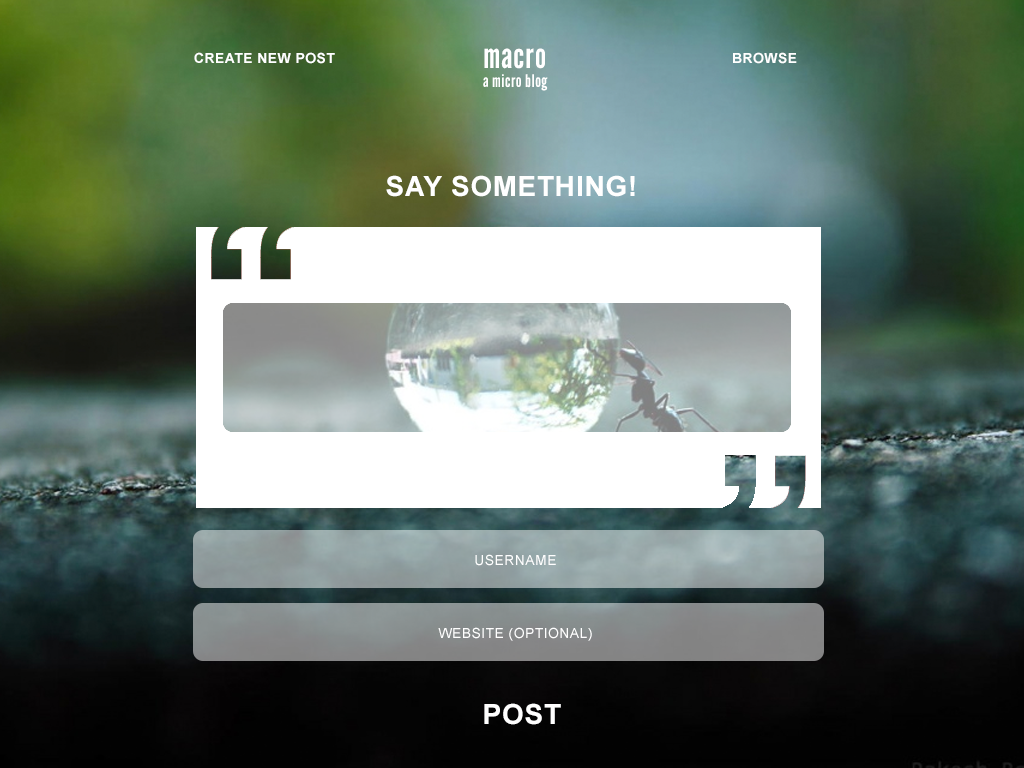
<style>
.page{position:relative;width:1024px;height:768px}
.page>*{position:absolute;margin:0}
.t1{font:24px "Arial-BoldMT";letter-spacing:0.03em;color:#ffffff;text-transform:uppercase}
.t2{font:60px "LeagueGothic-Regular";letter-spacing:0.03em;color:#ffffff}
.t3{font:30px "LeagueGothic-Regular";letter-spacing:0.03em;color:#ffffff}
.t4{font:48px "Arial-BoldMT";letter-spacing:0.03em;color:#ffffff;text-transform:uppercase}
.t5{font:24px "ArialMT";letter-spacing:0.03em;color:#ffffff;text-transform:uppercase}
</style>
<div class="page">
<p class="t1" style="left:194px;top:52px;width:141px;height:12px">create new post</p>
<p class="t2" style="left:484px;top:48px;width:61px;height:21px">macro</p>
<p class="t1" style="left:733px;top:52px;width:64px;height:12px">BROWSe</p>
<p class="t3" style="left:483px;top:74px;width:65px;height:17px">a micro blog</p>
<p class="t4" style="left:386px;top:175px;width:249px;height:22px">say something!</p>
<p class="t5" style="left:475px;top:554px;width:81px;height:12px">username</p>
<p class="t5" style="left:438px;top:627px;width:154px;height:14px">WEbsite (Optional)</p>
<p class="t4" style="left:484px;top:703px;width:77px;height:22px">POST</p>
</div>
